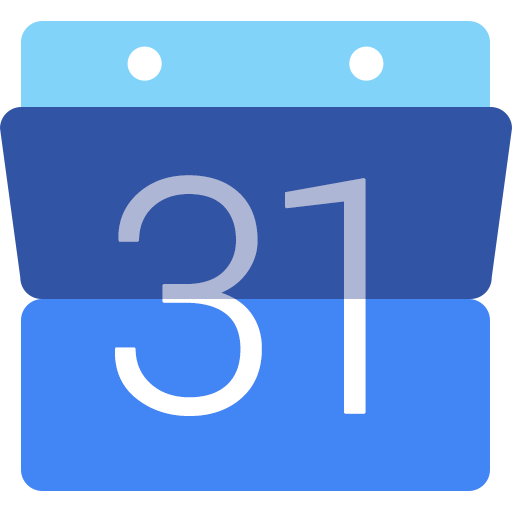
<style>
.page{position:relative;width:512px;height:512px;background:#3254a4}
.page>*{position:absolute;margin:0}
.t1{font:325.7px "Roboto-Light";letter-spacing:-0.1em;font-weight:bold}
</style>
<div class="page">
<p class="t1" style="left:115px;top:175px;width:251px;height:241px">31</p>
</div>
